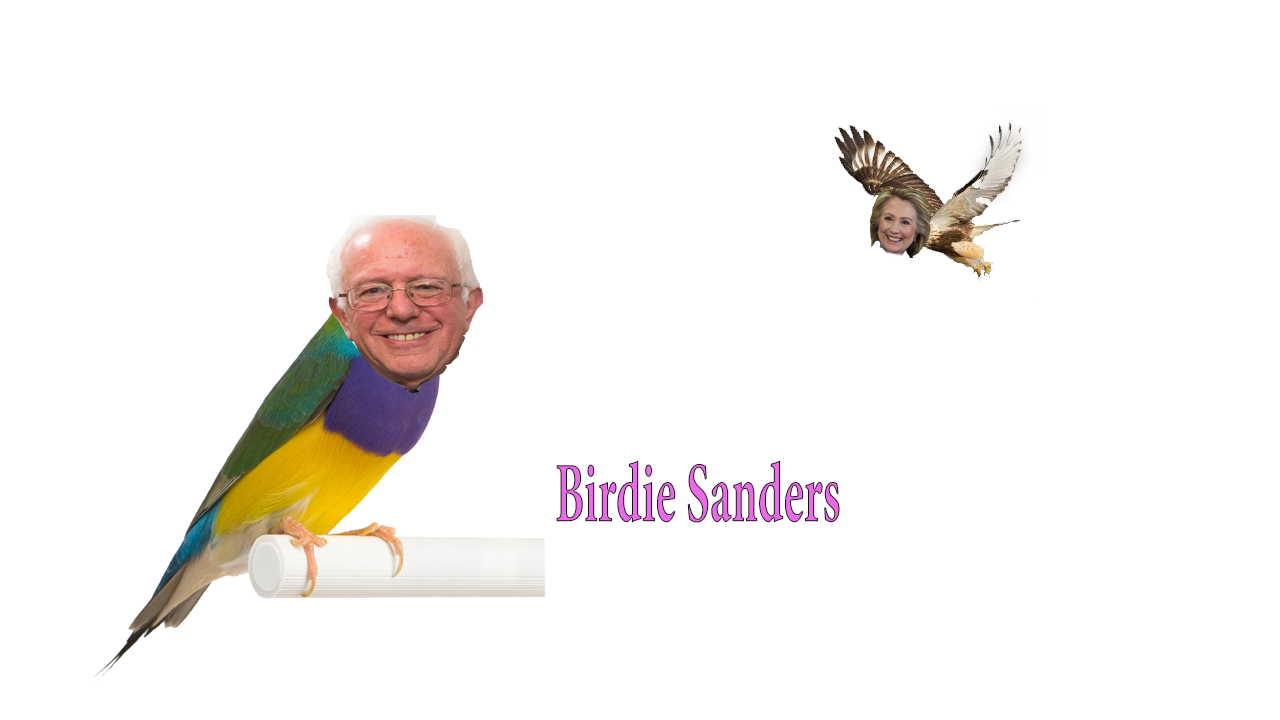
<style>
.page{position:relative;width:1280px;height:720px;background:#ffffff}
.page>*{position:absolute;margin:0}
.t1{font:85.8px "MinionPro-Bold";color:#ec69ea;scale:0.54 1}
</style>
<div class="page">
<p class="t1" style="left:556px;top:460px;width:284px;height:63px">Birdie Sanders</p>
</div>
